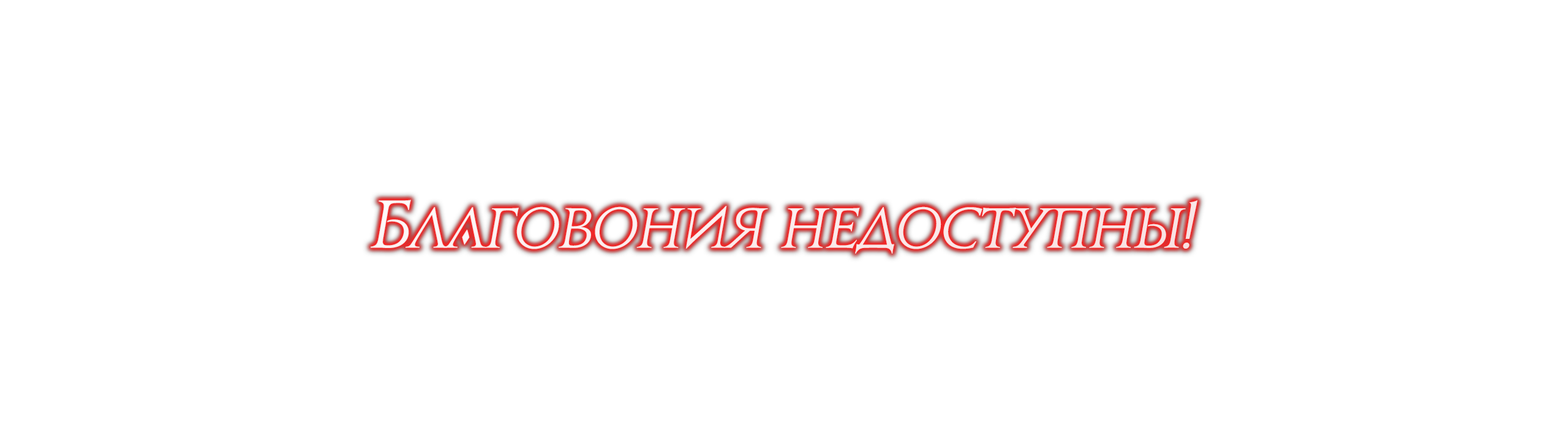
<style>
.page{position:relative;width:1568px;height:441px;background:#ffffff}
.page>*{position:absolute;margin:0}
.t1{font:51.2px "JupiterProRus";letter-spacing:-0.02em;color:#fae9e9;font-style:italic}
.t2{font:61.3px "JupiterProRus";letter-spacing:-0.02em;color:#fae9e9;font-style:italic}
</style>
<div class="page">
<p class="t1" style="left:371px;top:200px;width:826px;height:54px"><span class="t2">Б</span>лAговония недоступны<span class="t2">!</span></p>
</div>
